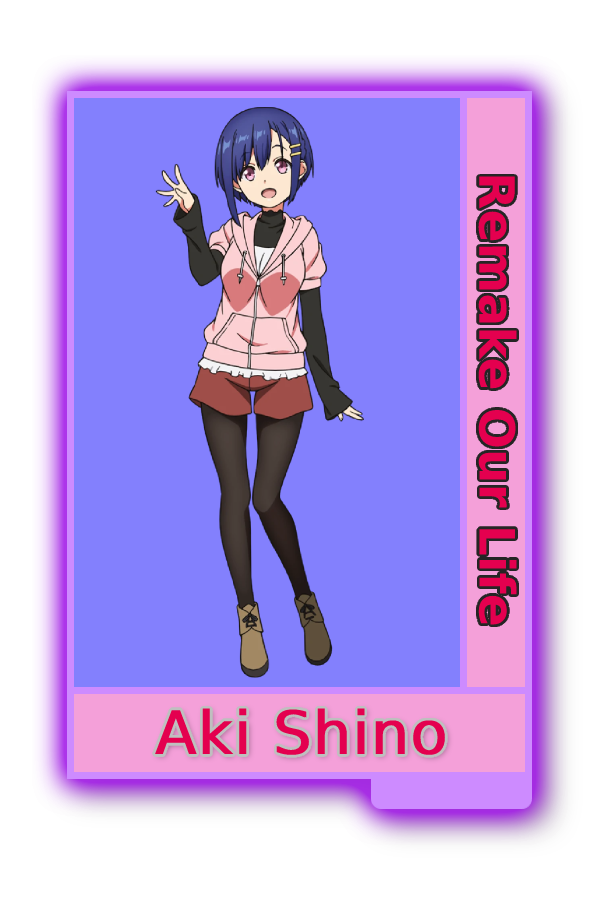
<style>
.page{position:relative;width:600px;height:900px;background:#8380fd}
.page>*{position:absolute;margin:0}
.t1{font:48.8px "MADETOMMY-Bold";color:#e4004f}
.t2{font:60px "CoolveticaRg-Regular";color:#e4004f;font-weight:bold}
</style>
<div class="page">
<p class="t1" style="left:478px;top:176px;width:39px;height:449px;rotate:90deg">Remake Our Life</p>
<p class="t2" style="left:155px;top:708px;width:290px;height:47px">Aki Shino</p>
</div>
